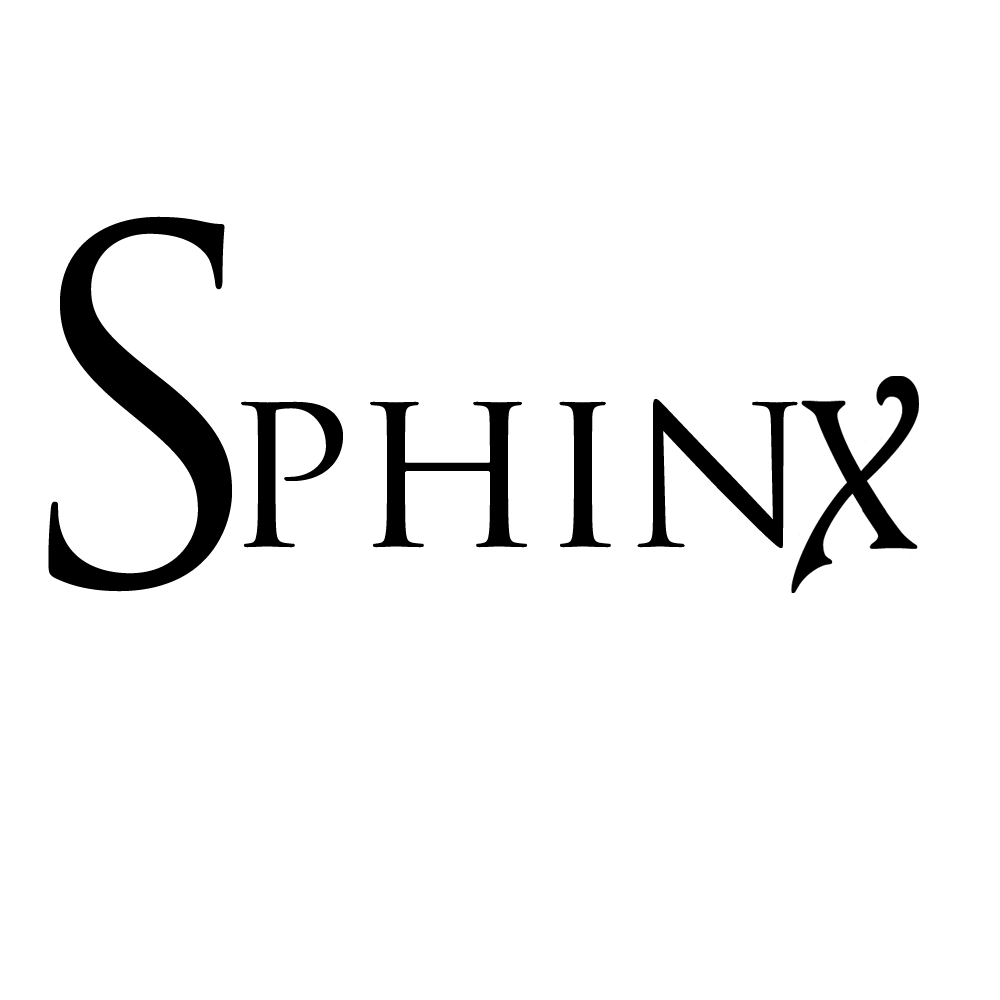
<style>
.page{position:relative;width:1000px;height:1000px;background:#ffffff}
.page>*{position:absolute;margin:0}
.t1{font:477.1px "TrajanPro-Regular";color:#000000}
.t2{font:225.7px "TrajanPro-Regular";color:#000000}
</style>
<div class="page">
<p class="t1" style="left:48px;top:216px;width:184px;height:376px">S</p>
<p class="t2" style="left:241px;top:399px;width:557px;height:149px">phin</p>
</div>
